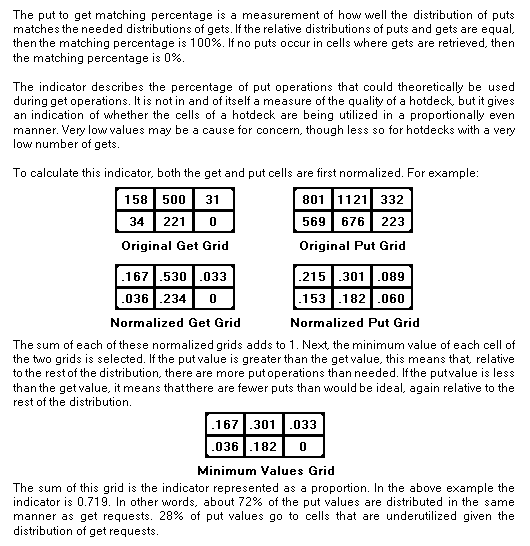
<style>
.page{position:relative;width:530px;height:546px;background:#ffffff}
.page>*{position:absolute;margin:0}
.t1{font:12px "MicrosoftSansSerif";color:#000000}
.t2{font:12px "MicrosoftSansSerif";color:#000000;font-weight:bold}
</style>
<div class="page">
<p class="t1" style="left:13px;top:10px;width:502px;height:169px;text-align:justify">The put to get matching percentage is a measurement of how well the distribution of puts matches the needed distributions of gets. If the relative distributions of puts and gets are equal, then the matching percentage is 100%. If no puts occur in cells where gets are retrieved, then the matching percentage is 0%.<br><br>The indicator describes the percentage of put operations that could theoretically be used during get operations. It is not in and of itself a measure of the quality of a hotdeck, but it gives an indication of whether the cells of a hotdeck are being utilized in a proportionally even manner. Very low values may be a cause for concern, though less so for hotdecks with a very low number of gets.<br><br>To calculate this indicator, both the get and put cells are first normalized. For example:</p>
<p class="t2" style="left:125px;top:195px;width:22px;height:9px">158</p>
<p class="t2" style="left:163px;top:195px;width:22px;height:9px">500</p>
<p class="t2" style="left:206px;top:195px;width:12px;height:9px">31</p>
<p class="t2" style="left:303px;top:195px;width:20px;height:9px">801</p>
<p class="t2" style="left:338px;top:195px;width:28px;height:9px">1121</p>
<p class="t2" style="left:381px;top:195px;width:22px;height:9px">332</p>
<p class="t2" style="left:130px;top:217px;width:14px;height:9px">34</p>
<p class="t2" style="left:164px;top:217px;width:20px;height:9px">221</p>
<p class="t2" style="left:210px;top:217px;width:6px;height:9px">0</p>
<p class="t2" style="left:303px;top:217px;width:22px;height:9px">569</p>
<p class="t2" style="left:342px;top:217px;width:22px;height:9px">676</p>
<p class="t2" style="left:382px;top:217px;width:22px;height:9px">223</p>
<p class="t2" style="left:122px;top:241px;width:106px;height:11px">Original Get Grid</p>
<p class="t2" style="left:300px;top:241px;width:105px;height:11px">Original Put Grid</p>
<p class="t2" style="left:122px;top:272px;width:26px;height:9px">.167</p>
<p class="t2" style="left:160px;top:272px;width:26px;height:9px">.530</p>
<p class="t2" style="left:200px;top:272px;width:26px;height:9px">.033</p>
<p class="t2" style="left:299px;top:272px;width:26px;height:9px">.215</p>
<p class="t2" style="left:339px;top:272px;width:24px;height:9px">.301</p>
<p class="t2" style="left:378px;top:272px;width:26px;height:9px">.089</p>
<p class="t2" style="left:122px;top:294px;width:26px;height:9px">.036</p>
<p class="t2" style="left:160px;top:294px;width:26px;height:9px">.234</p>
<p class="t2" style="left:210px;top:294px;width:6px;height:9px">0</p>
<p class="t2" style="left:299px;top:294px;width:26px;height:9px">.153</p>
<p class="t2" style="left:339px;top:294px;width:26px;height:9px">.182</p>
<p class="t2" style="left:378px;top:294px;width:26px;height:9px">.060</p>
<p class="t2" style="left:111px;top:318px;width:129px;height:9px">Normalized Get Grid</p>
<p class="t2" style="left:291px;top:318px;width:128px;height:9px">Normalized Put Grid</p>
<p class="t1" style="left:13px;top:340px;width:502px;height:66px;text-align:justify">The sum of each of these normalized grids adds to 1. Next, the minimum value of each cell of the two grids is selected. If the put value is greater than the get value, this means that, relative to the rest of the distribution, there are more put operations than needed. If the put value is less than the get value, it means that there are fewer puts than would be ideal, again relative to the rest of the distribution.</p>
<p class="t2" style="left:212px;top:420px;width:26px;height:9px">.167</p>
<p class="t2" style="left:250px;top:420px;width:24px;height:9px">.301</p>
<p class="t2" style="left:290px;top:420px;width:26px;height:9px">.033</p>
<p class="t2" style="left:212px;top:442px;width:26px;height:9px">.036</p>
<p class="t2" style="left:250px;top:442px;width:26px;height:9px">.182</p>
<p class="t2" style="left:300px;top:442px;width:6px;height:9px">0</p>
<p class="t2" style="left:198px;top:466px;width:136px;height:9px">Minimum Values Grid</p>
<p class="t1" style="left:13px;top:483px;width:501px;height:54px;text-align:justify">The sum of this grid is the indicator represented as a proportion. In the above example the indicator is 0.719. In other words, about 72% of the put values are distributed in the same manner as get requests. 28% of put values go to cells that are underutilized given the distribution of get requests.</p>
</div>
